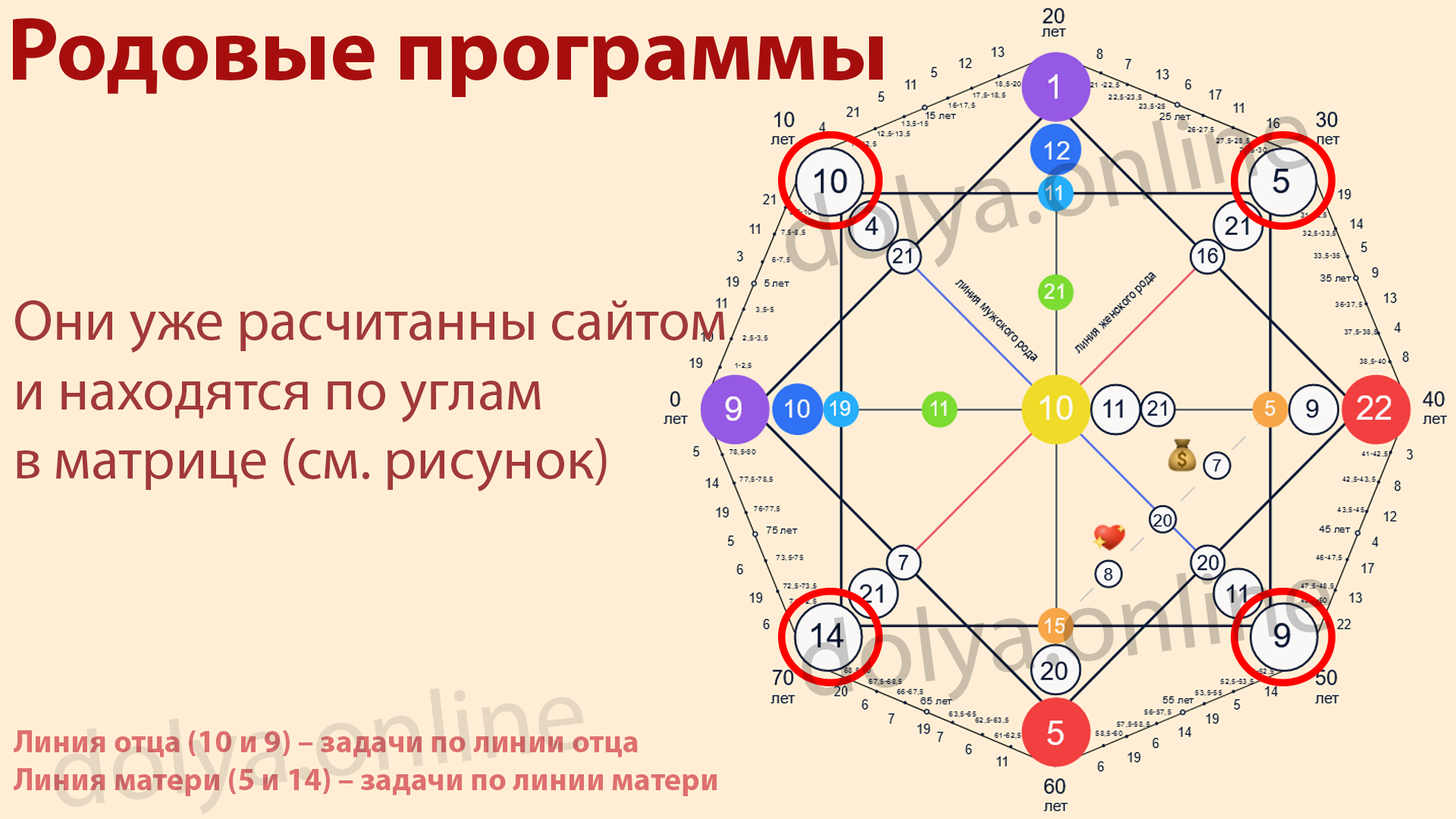
<style>
.page{position:relative;width:1456px;height:819px;background:#ffeed5}
.page>*{position:absolute;margin:0}
.t1{font:89.5px "MyriadPro-Bold";color:#a60e0e}
.t2{font:57.9px "MyriadPro-Regular";color:#a13939}
.t3{font:105.3px "MyriadPro-Regular";color:#e7d7c1}
.t4{font:31.6px "MyriadPro-Bold";color:#de6f6f}
</style>
<div class="page">
<p class="t1" style="left:13px;top:18px;width:870px;height:79px">Родовые программы</p>
<p class="t2" style="left:15px;top:300px;width:710px;height:191px">Они уже расчитанны сайтом <br>и находятся по углам<br>в матрице (см. рисунок)</p>
<p class="t3" style="left:54px;top:688px;width:530px;height:126px;rotate:-7deg">dolya.online</p>
<p class="t4" style="left:13px;top:730px;width:704px;height:66px">Линия отца (10 и 9) – задачи по линии отца<br>Линия матери (5 и 14) – задачи по линии матери</p>
</div>
